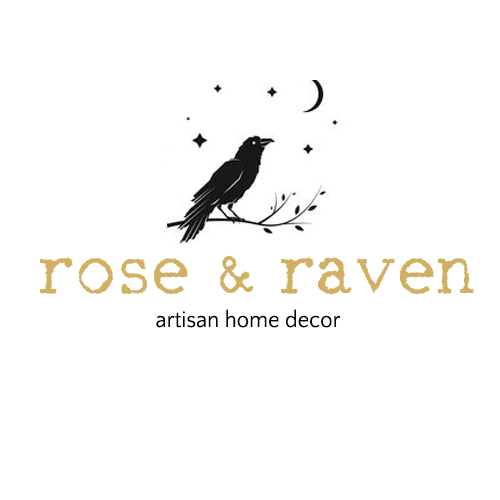
<style>
.page{position:relative;width:500px;height:500px;background:#ffffff}
.page>*{position:absolute;margin:0}
.t1{font:150.3px "RM-Typerighter-old";letter-spacing:0.026em;color:#d1b061;scale:0.95 1}
.t2{font:133.6px "RM-Typerighter-old";letter-spacing:0.006em;color:#d1b061;scale:0.95 1}
.t3{font:150.3px "RM-Typerighter-old";letter-spacing:0.006em;color:#d1b061;scale:0.95 1}
.t4{font:150.3px "RM-Typerighter-old";letter-spacing:0.01em;color:#d1b061;scale:0.95 1}
.t5{font:150.3px "RM-Typerighter-old";letter-spacing:0.02em;color:#d1b061;scale:0.95 1}
.t6{font:23.4px "QuattrocentoSans";color:#040300;scale:0.95 1}
</style>
<div class="page">
<p class="t1" style="left:40px;top:255px;width:434px;height:40px">rose <span class="t2">&amp; </span><span class="t3">r</span><span class="t4">ave</span><span class="t5">n</span></p>
<p class="t6" style="left:156px;top:309px;width:185px;height:19px">artisan home decor</p>
</div>
